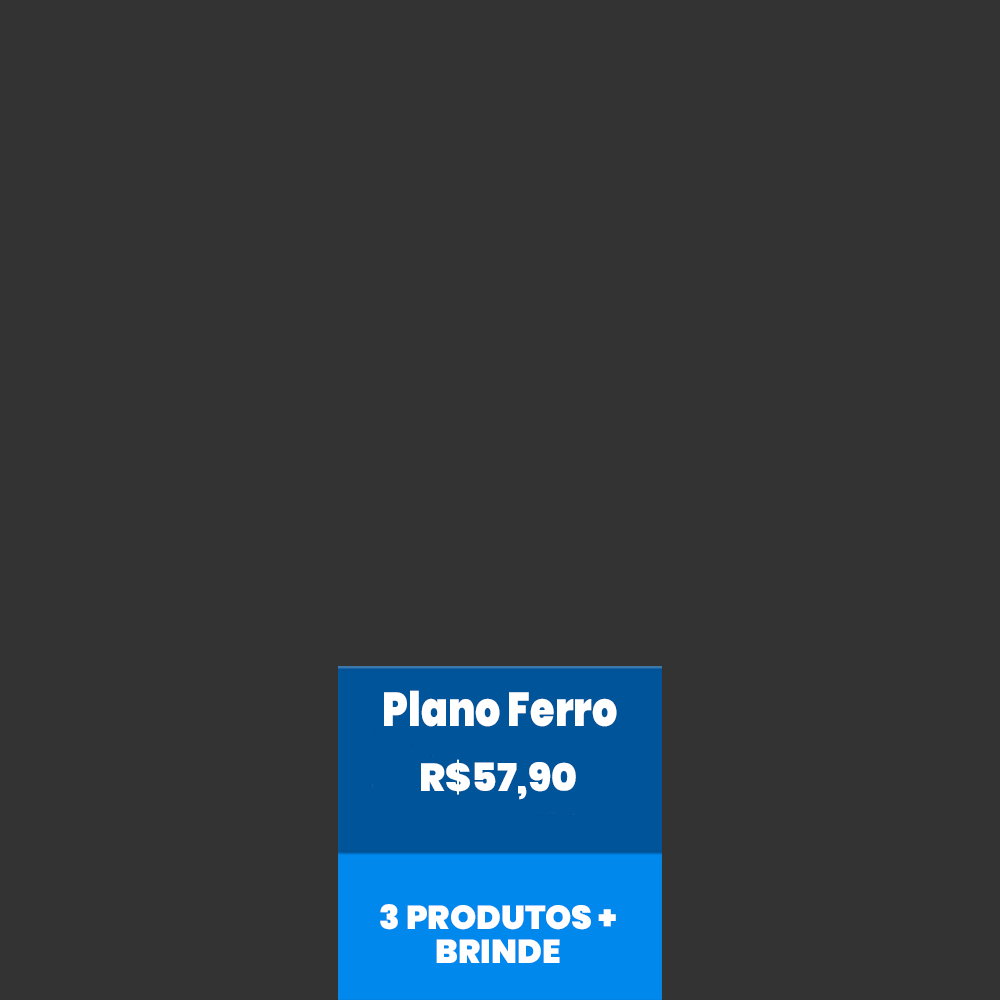
<style>
.page{position:relative;width:1000px;height:1000px;background:#333333}
.page>*{position:absolute;margin:0}
.t1{font:47.6px "Poppins-Black";color:#ffffff;scale:0.83 1}
.t2{font:39.1px "Poppins-Black";color:#ffffff}
.t3{font:33.3px/33.3px "Poppins-Black";color:#ffffff}
</style>
<div class="page">
<p class="t1" style="left:384px;top:690px;width:233px;height:37px">Plano Ferro</p>
<p class="t2" style="left:421px;top:759px;width:155px;height:41px">R$57,90</p>
<p class="t3" style="left:380px;top:904px;width:236px;height:59px;text-align:center">3 PRODUTOS +<br>BRINDE</p>
</div>
